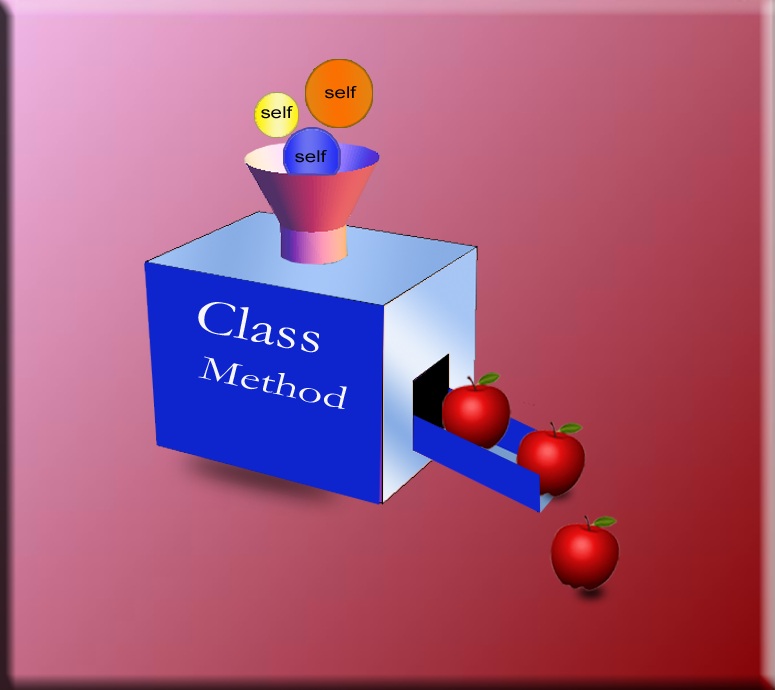
<style>
.page{position:relative;width:775px;height:690px}
.page>*{position:absolute;margin:0}
.t1{font:16.4px "ArialMT";color:#040404;scale:1.24 1}
.t2{font:49.4px "Garamond";color:#f7f7f9;scale:1.31 1}
.t3{font:34.1px "Garamond";color:#f7f7f9;scale:1.44 1}
</style>
<div class="page">
<p class="t1" style="left:325px;top:86px;width:32px;height:13px">self</p>
<p class="t1" style="left:261px;top:106px;width:32px;height:13px">self</p>
<p class="t1" style="left:295px;top:150px;width:32px;height:13px">self</p>
<p class="t2" style="left:198px;top:302px;width:121px;height:51px;rotate:11deg">Class</p>
<p class="t3" style="left:198px;top:356px;width:149px;height:53px;rotate:12deg">Method</p>
</div>
